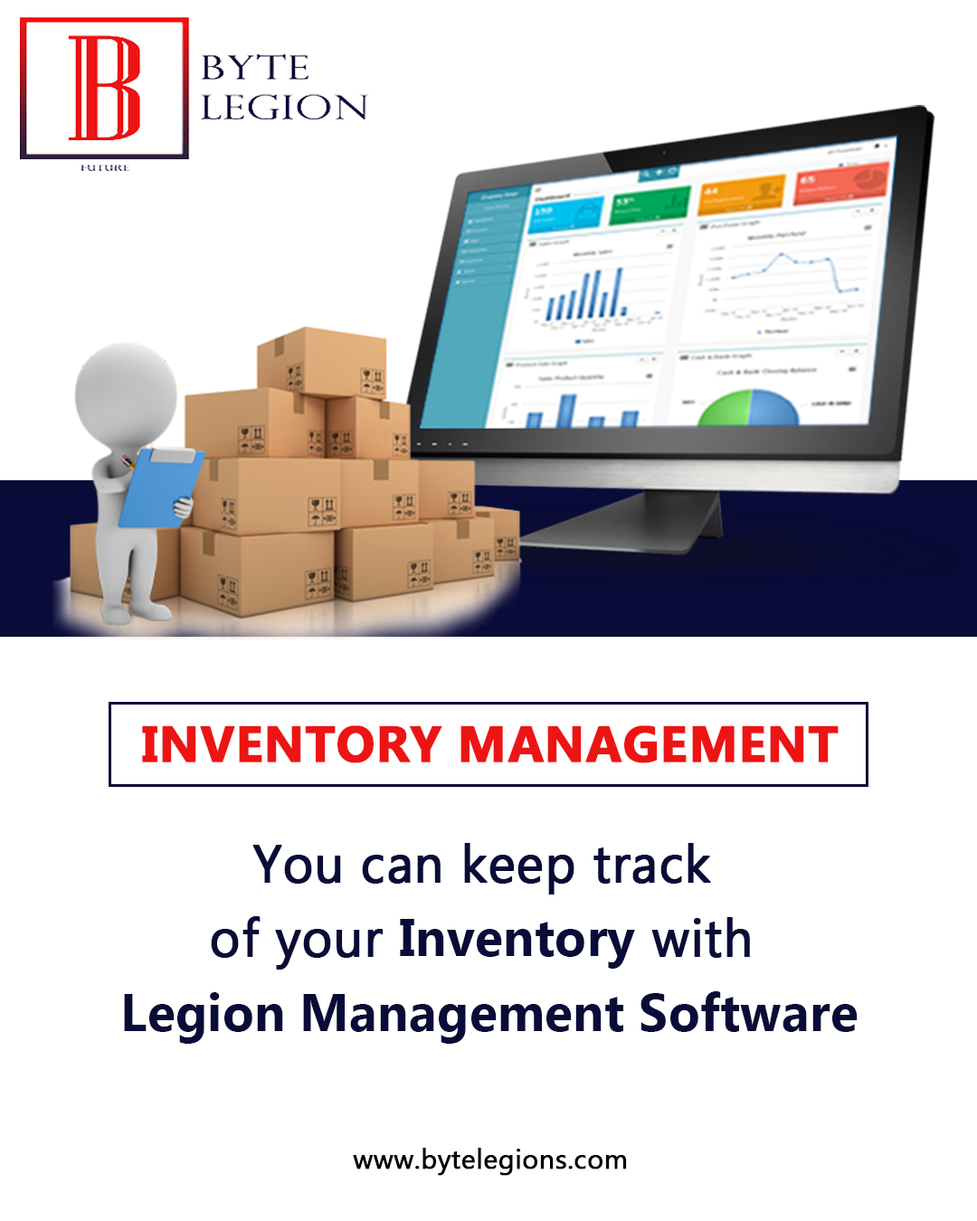
<style>
.page{position:relative;width:977px;height:1221px;background:#ffffff}
.page>*{position:absolute;margin:0}
.t1{font:50.6px "MyanmarText-Bold";color:#ed1414;text-transform:uppercase;font-weight:bold}
.t2{font:52.1px/75px "MyanmarText";color:#090b38;font-weight:bold}
.t3{font:52.1px/75px "MyanmarText-Bold";color:#090b38}
.t4{font:27.1px "MyanmarText";color:#010101;font-weight:bold}
</style>
<div class="page">
<p class="t1" style="left:142px;top:725px;width:696px;height:38px">Inventory Management</p>
<p class="t2" style="left:124px;top:843px;width:733px;height:201px;text-align:center">You can keep track <br>of your <span class="t3">Inventory</span> with <br><span class="t3">Legion Management Software</span></p>
<p class="t4" style="left:353px;top:1148px;width:274px;height:28px">www.bytelegions.com</p>
</div>
